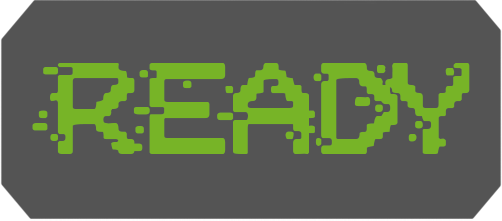
<style>
.page{position:relative;width:502px;height:221px;background:#545454}
.page>*{position:absolute;margin:0}
.t1{font:130.5px "PositiveSystem";color:#77b427}
</style>
<div class="page">
<p class="t1" style="left:32px;top:63px;width:438px;height:91px">Ready</p>
</div>
